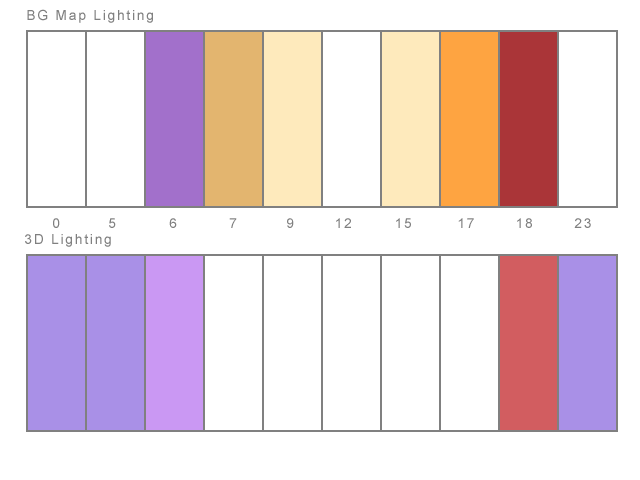
<style>
.page{position:relative;width:640px;height:480px;background:#ffffff}
.page>*{position:absolute;margin:0}
.t1{font:14px "ArialMT";letter-spacing:0.12em;color:#808080}
</style>
<div class="page">
<p class="t1" style="left:27px;top:9px;width:126px;height:14px">BG Map Lighting</p>
<p class="t1" style="left:53px;top:218px;width:7px;height:10px">0</p>
<p class="t1" style="left:109px;top:218px;width:7px;height:10px">5</p>
<p class="t1" style="left:169px;top:218px;width:8px;height:10px">6</p>
<p class="t1" style="left:229px;top:218px;width:8px;height:10px">7</p>
<p class="t1" style="left:287px;top:218px;width:7px;height:10px">9</p>
<p class="t1" style="left:336px;top:218px;width:15px;height:10px">12</p>
<p class="t1" style="left:396px;top:218px;width:15px;height:10px">15</p>
<p class="t1" style="left:458px;top:218px;width:16px;height:10px">17</p>
<p class="t1" style="left:517px;top:218px;width:15px;height:10px">18</p>
<p class="t1" style="left:574px;top:218px;width:17px;height:10px">23</p>
<p class="t1" style="left:25px;top:234px;width:86px;height:13px">3D Lighting</p>
</div>
